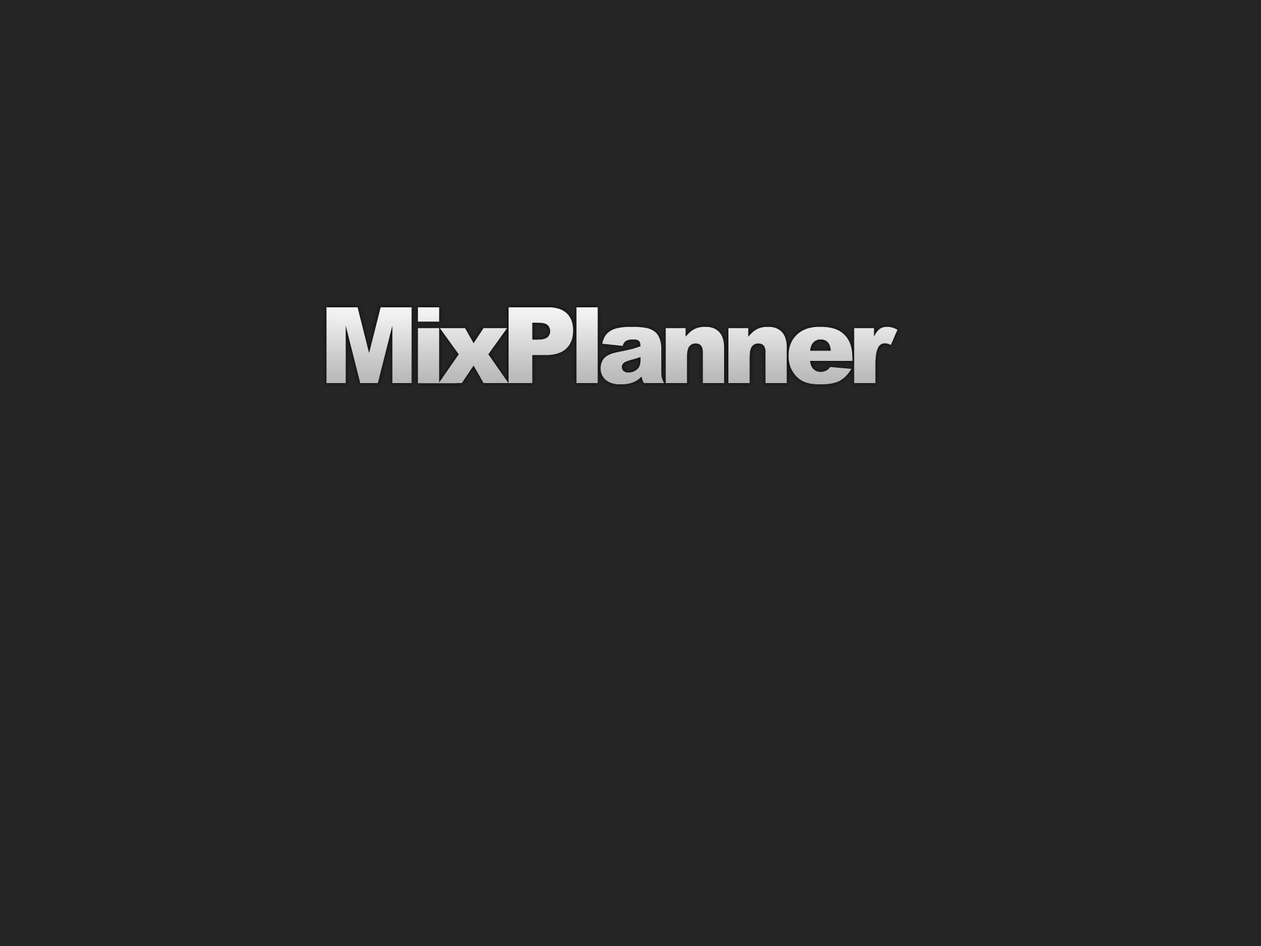
<style>
.page{position:relative;width:1261px;height:946px;background:#252525}
.page>*{position:absolute;margin:0}
.t1{font:105.9px "Arial-Black";letter-spacing:-0.075em;color:#d3d3d3}
</style>
<div class="page">
<p class="t1" style="left:326px;top:307px;width:572px;height:77px">MixPlanner</p>
</div>
